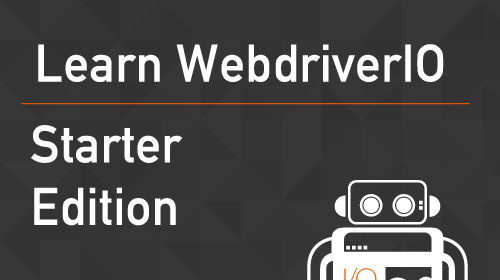
<style>
.page{position:relative;width:500px;height:280px;background:#353535}
.page>*{position:absolute;margin:0}
.t1{font:52px "DINAlternate-Bold";color:#ffffff}
</style>
<div class="page">
<p class="t1" style="left:38px;top:44px;width:406px;height:38px">Learn WebdriverIO</p>
<p class="t1" style="left:31px;top:125px;width:152px;height:101px">Starter<br>Edition</p>
</div>
